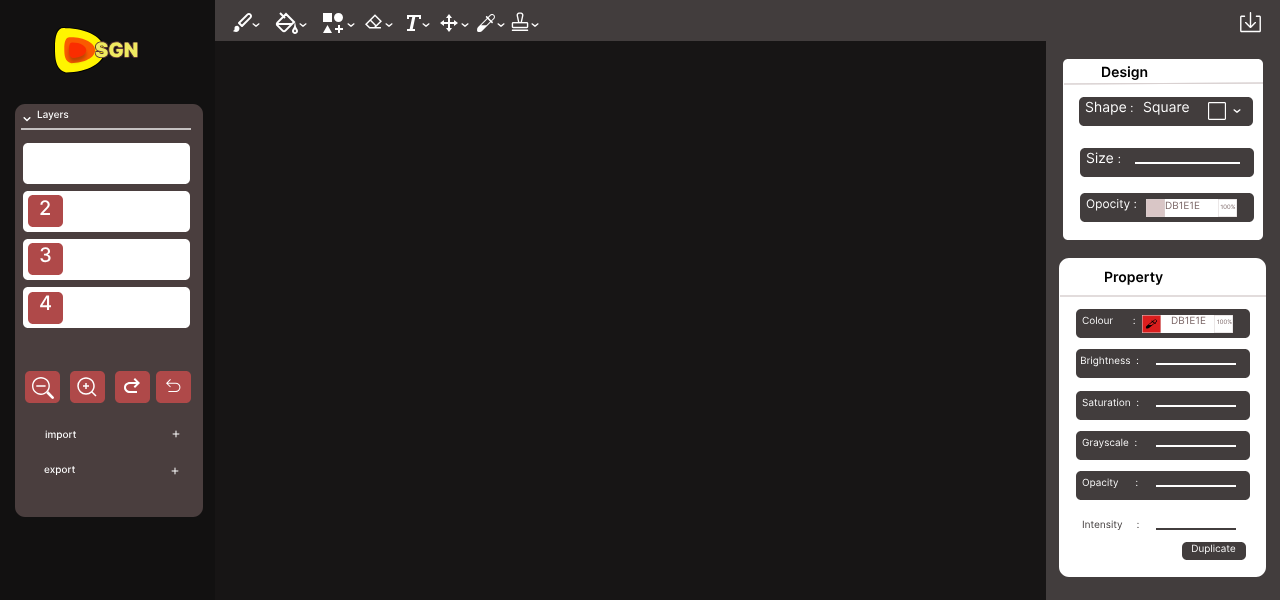
<style>
.page{position:relative;width:1280px;height:600px;background:#171515}
.page>*{position:absolute;margin:0}
.t1{font:20px "Inter-Black";color:#efe960}
.t2{font:14px "Inter-SemiBold";color:#000000}
.t3{font:14px "Inter-Regular";color:#ffffff}
.t4{font:12px "Inter-Regular";color:#ffffff}
.t5{font:10px "Inter-Medium";color:#ffffff}
.t6{font:20px "Inter-Medium";color:#ffffff}
.t7{font:10px "Inter-Regular";color:#7a6565}
.t8{font:6px "Inter-Regular"}
.t9{font:10px "Inter-Regular"}
.t10{font:10px "Inter-Regular";color:#ffffff}
</style>
<div class="page">
<p class="t1" style="left:95px;top:42px;width:43px;height:16px">SGN</p>
<p class="t2" style="left:1102px;top:66px;width:46px;height:15px">Design</p>
<p class="t3" style="left:1085px;top:101px;width:48px;height:14px">Shape<span class="t4"> :</span></p>
<p class="t3" style="left:1143px;top:101px;width:46px;height:14px">Square</p>
<p class="t5" style="left:37px;top:110px;width:32px;height:11px">Layers</p>
<p class="t3" style="left:1086px;top:152px;width:35px;height:12px">Size <span class="t4">:</span></p>
<p class="t6" style="left:40px;top:200px;width:10px;height:15px">2</p>
<p class="t4" style="left:1086px;top:199px;width:50px;height:12px">Opocity :</p>
<p class="t7" style="left:1165px;top:201px;width:35px;height:8px">DB1E1E</p>
<p class="t8" style="left:1220px;top:204px;width:16px;height:6px">100%</p>
<p class="t6" style="left:40px;top:247px;width:11px;height:16px">3</p>
<p class="t2" style="left:1105px;top:271px;width:58px;height:14px">Property</p>
<p class="t6" style="left:40px;top:295px;width:12px;height:15px">4</p>
<p class="t9" style="left:1082px;top:316px;width:53px;height:9px">Colour       :</p>
<p class="t7" style="left:1171px;top:316px;width:35px;height:8px">DB1E1E</p>
<p class="t8" style="left:1217px;top:319px;width:15px;height:6px">100%</p>
<p class="t10" style="left:1081px;top:356px;width:58px;height:11px">Brightness  :</p>
<p class="t10" style="left:1082px;top:398px;width:57px;height:9px">Saturation  :</p>
<p class="t5" style="left:45px;top:430px;width:32px;height:11px">import</p>
<p class="t9" style="left:1082px;top:438px;width:55px;height:11px">Grayscale  :</p>
<p class="t5" style="left:44px;top:466px;width:31px;height:10px">export</p>
<p class="t9" style="left:1082px;top:478px;width:56px;height:11px">Opacity      :</p>
<p class="t9" style="left:1082px;top:520px;width:57px;height:11px">Intensity     :</p>
<p class="t10" style="left:1192px;top:544px;width:44px;height:11px">Duplicate</p>
</div>
